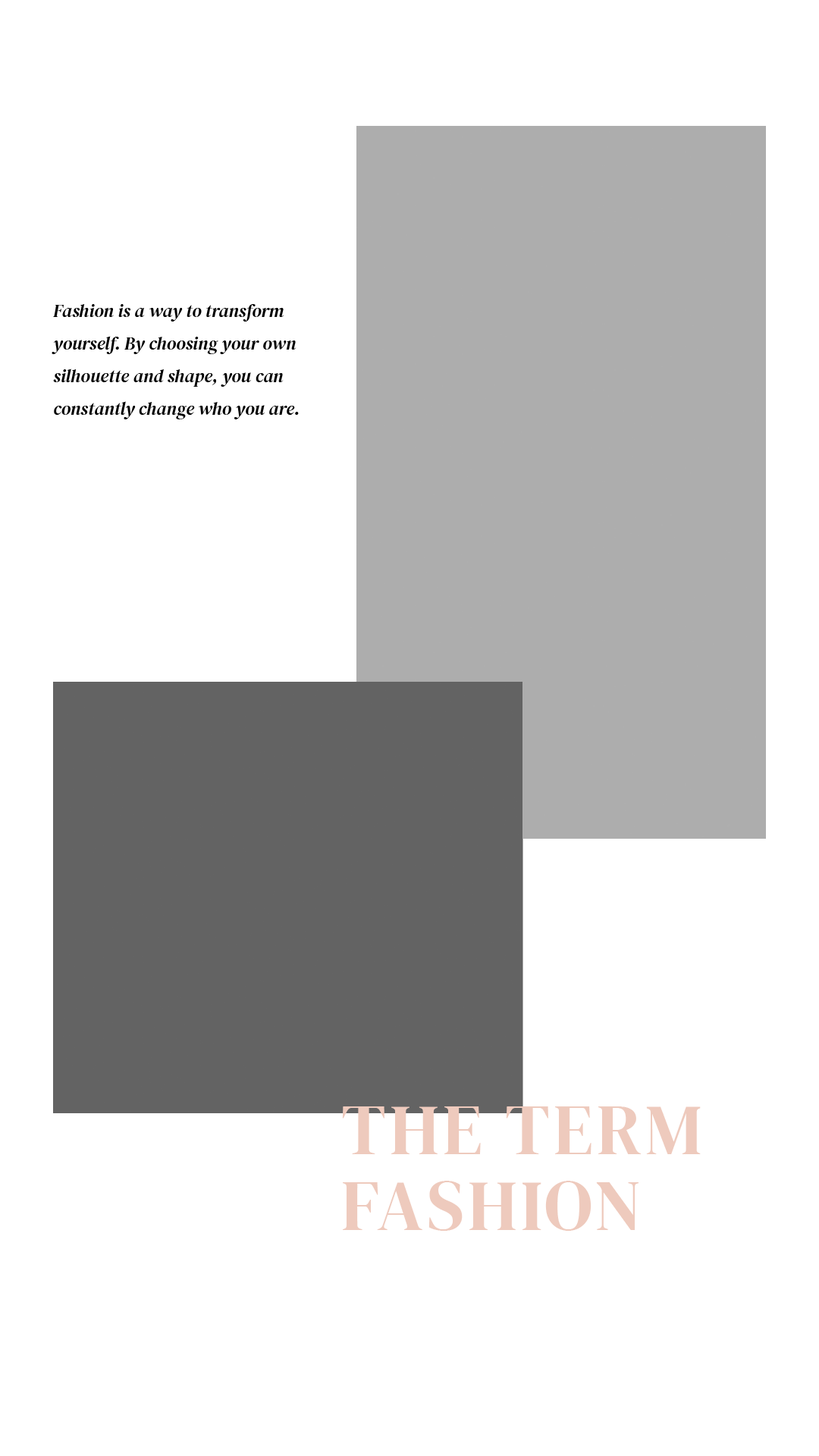
<style>
.page{position:relative;width:819px;height:1456px;background:#ffffff}
.page>*{position:absolute;margin:0}
.t1{font:18.2px/32.6px "DMSerifDisplay-Italic";color:#000000}
.t2{font:71.3px/75.8px "DMSerifDisplay-Regular";letter-spacing:0.053em;color:#eecabd;text-transform:uppercase}
</style>
<div class="page">
<p class="t1" style="left:52px;top:304px;width:247px;height:115px">Fashion is a way to transform yourself. By choosing your own silhouette and shape, you can constantly change who you are.</p>
<p class="t2" style="left:342px;top:1106px;width:359px;height:125px">the term<br>fashion</p>
</div>
